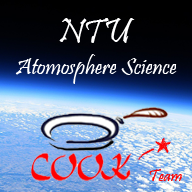
<style>
.page{position:relative;width:192px;height:192px}
.page>*{position:absolute;margin:0}
.t1{font:36px "Pristina-Regular";color:#ffffff}
.t2{font:24px "Pristina-Regular";color:#ffffff}
.t3{font:18px "Pristina-Regular";color:#ff0000}
</style>
<div class="page">
<p class="t1" style="left:59px;top:18px;width:76px;height:25px">NTU</p>
<p class="t2" style="left:15px;top:54px;width:162px;height:30px">Atomosphere Science</p>
<p class="t3" style="left:149px;top:169px;width:33px;height:12px">Team</p>
</div>
